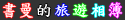
<style>
.page{position:relative;width:125px;height:20px;background:#333333}
.page>*{position:absolute;margin:0}
.t1{font:16px "DFKaiShu-SB-Estd-BF";color:#ffffff}
</style>
<div class="page">
<p class="t1" style="left:3px;top:2px;width:13px;height:16px">書</p>
<p class="t1" style="left:20px;top:3px;width:13px;height:15px">曼</p>
<p class="t1" style="left:37px;top:4px;width:14px;height:13px">的</p>
<p class="t1" style="left:55px;top:4px;width:15px;height:12px">旅</p>
<p class="t1" style="left:73px;top:3px;width:15px;height:15px">遊</p>
<p class="t1" style="left:91px;top:4px;width:14px;height:13px">相</p>
<p class="t1" style="left:109px;top:2px;width:13px;height:16px">簿</p>
</div>
